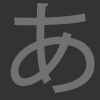
<style>
.page{position:relative;width:100px;height:100px;background:#333333}
.page>*{position:absolute;margin:0}
.t1{font:100px "KozGoPr6N-Regular";letter-spacing:0.01em;color:#717171;font-weight:bold}
</style>
<div class="page">
<p class="t1" style="left:10px;top:3px;width:85px;height:90px">あ</p>
</div>
